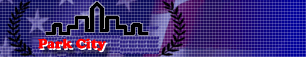
<style>
.page{position:relative;width:306px;height:57px}
.page>*{position:absolute;margin:0}
.t1{font:14px "CooperBlack";color:#ff0000}
.t2{font:14px "CooperBlack"}
</style>
<div class="page">
<p class="t1" style="left:38px;top:39px;width:68px;height:16px">Park City</p>
<p class="t2" style="left:39px;top:40px;width:68px;height:17px">Park City</p>
</div>
